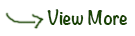
<style>
.page{position:relative;width:135px;height:36px;background:#ffffff}
.page>*{position:absolute;margin:0}
.t1{font:18px "Noteworthy-Bold";color:#1a4404}
</style>
<div class="page">
<p class="t1" style="left:47px;top:9px;width:80px;height:16px">View More</p>
</div>
